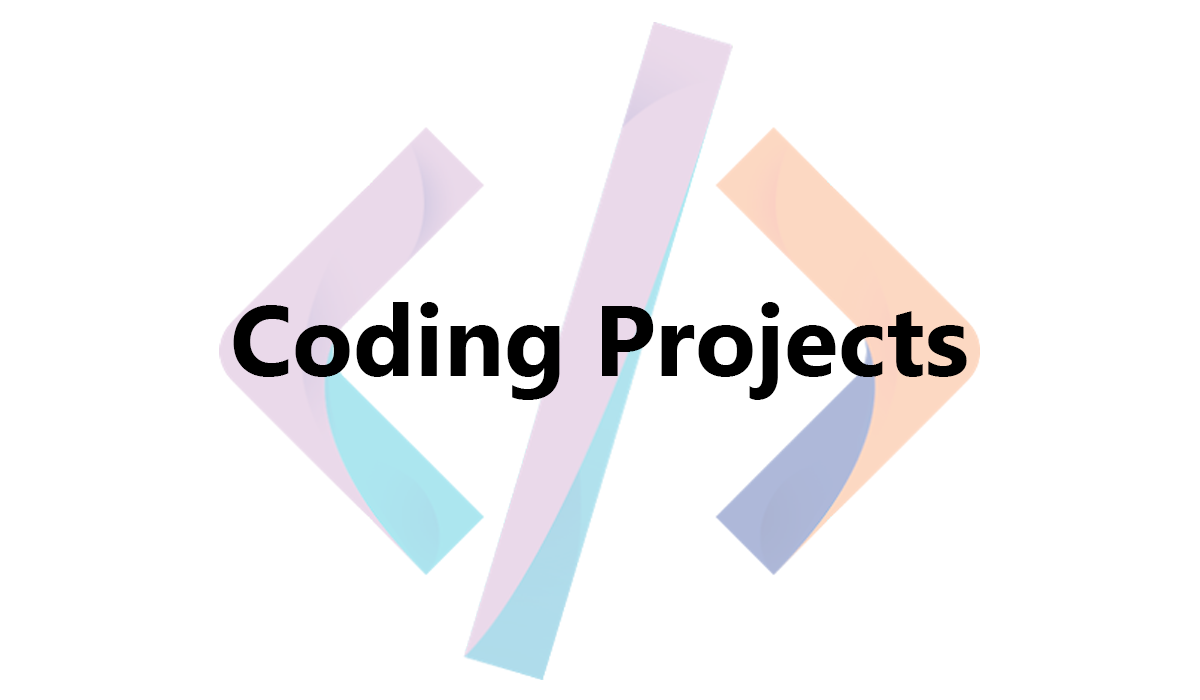
<style>
.page{position:relative;width:1200px;height:700px;background:#ffffff}
.page>*{position:absolute;margin:0}
.t1{font:100px "MicrosoftTaiLe-Bold";color:#000000}
</style>
<div class="page">
<p class="t1" style="left:233px;top:302px;width:734px;height:98px">Coding Projects</p>
</div>
